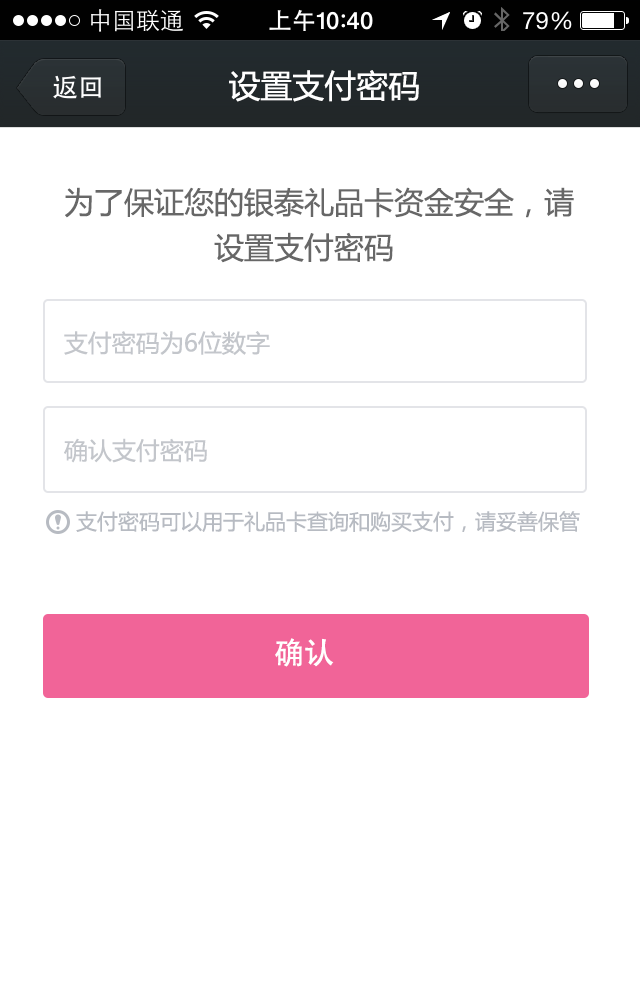
<style>
.page{position:relative;width:640px;height:997px;background:#ffffff}
.page>*{position:absolute;margin:0}
.t1{font:32px "MicrosoftYaHei";color:#ffffff}
.t2{font:30px "MicrosoftYaHei";color:#676767}
.t3{font:24px "MicrosoftYaHei";color:#c3c6cb}
.t4{font:21px "MicrosoftYaHei";color:#b7bbc2}
.t5{font:30px "AdobeHeitiStd-Regular";color:#ffffff}
</style>
<div class="page">
<p class="t1" style="left:229px;top:70px;width:190px;height:32px">设置支付密码</p>
<p class="t2" style="left:65px;top:187px;width:509px;height:31px">为了保证您的银泰礼品卡资金安全，请</p>
<p class="t2" style="left:214px;top:232px;width:179px;height:31px">设置支付密码</p>
<p class="t3" style="left:64px;top:331px;width:206px;height:24px">支付密码为6位数字</p>
<p class="t3" style="left:64px;top:438px;width:143px;height:25px">确认支付密码</p>
<p class="t4" style="left:76px;top:511px;width:504px;height:21px">支付密码可以用于礼品卡查询和购买支付，请妥善保管</p>
<p class="t5" style="left:275px;top:638px;width:59px;height:29px">确认</p>
</div>
